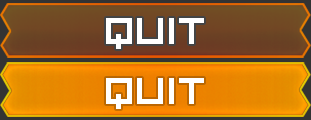
<style>
.page{position:relative;width:311px;height:120px}
.page>*{position:absolute;margin:0}
.t1{font:66.7px "VisitorTT2BRK";color:#ffffff}
</style>
<div class="page">
<p class="t1" style="left:106px;top:18px;width:98px;height:31px">quit</p>
<p class="t1" style="left:106px;top:78px;width:98px;height:31px">quit</p>
</div>
